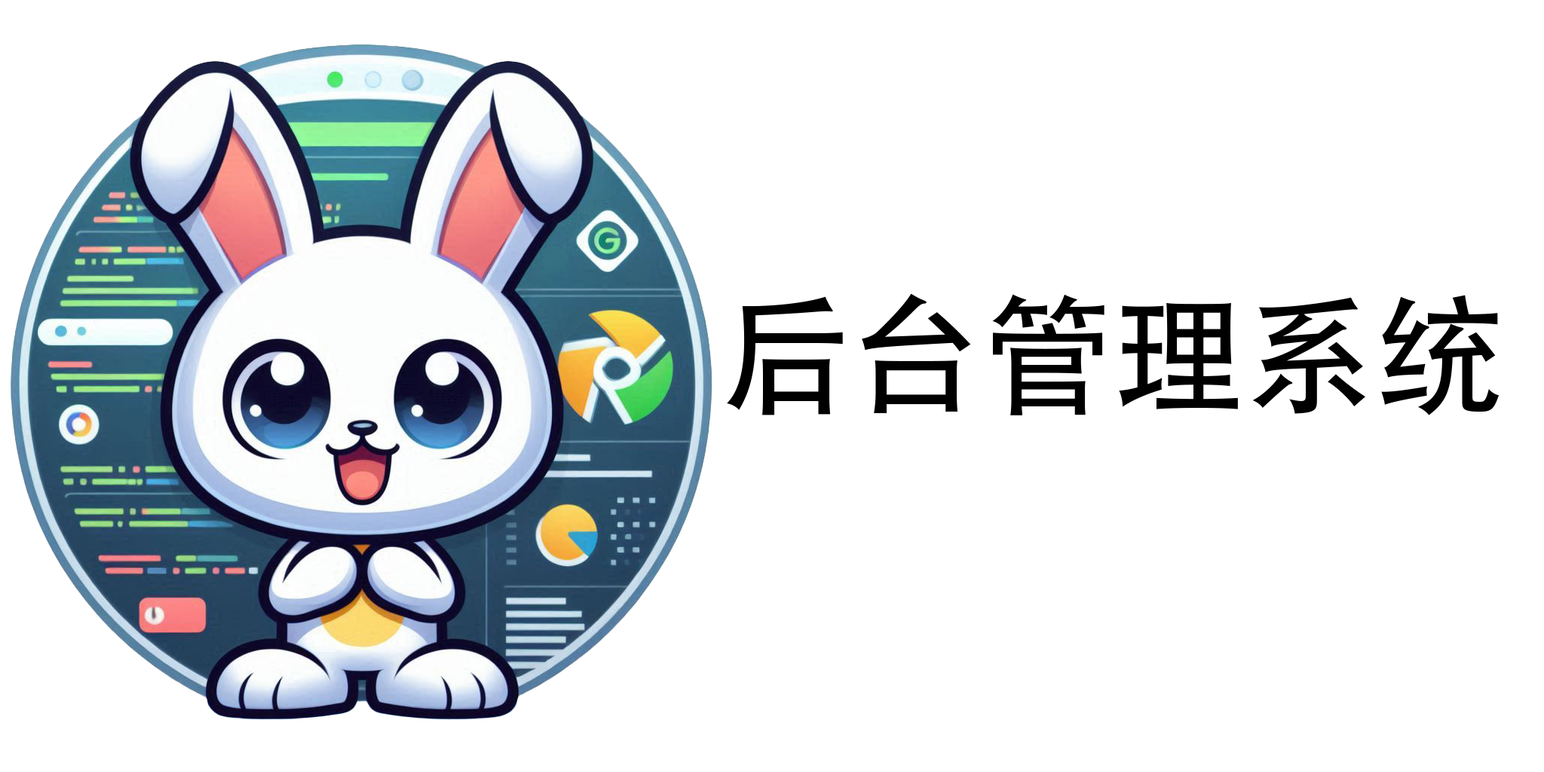
<style>
.page{position:relative;width:1544px;height:772px;background:#ffffff}
.page>*{position:absolute;margin:0}
.t1{font:130.7px "AdobeHeitiStd-Regular";color:#000000}
</style>
<div class="page">
<p class="t1" style="left:727px;top:293px;width:773px;height:122px">后台管理系统</p>
</div>
